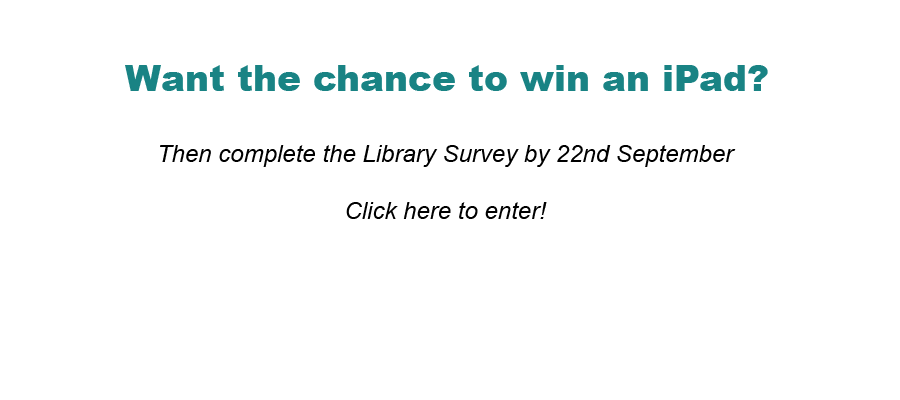
<style>
.page{position:relative;width:900px;height:400px;background:#ffffff}
.page>*{position:absolute;margin:0}
.t1{font:36px "Arial-Black";color:#198384}
.t2{font:24px "Arial-ItalicMT";color:#000000}
</style>
<div class="page">
<p class="t1" style="left:125px;top:65px;width:643px;height:26px">Want the chance to win an iPad?</p>
<p class="t2" style="left:160px;top:145px;width:576px;height:74px;text-align:center">Then complete the Library Survey by 22nd September<br><br>Click here to enter!</p>
</div>
